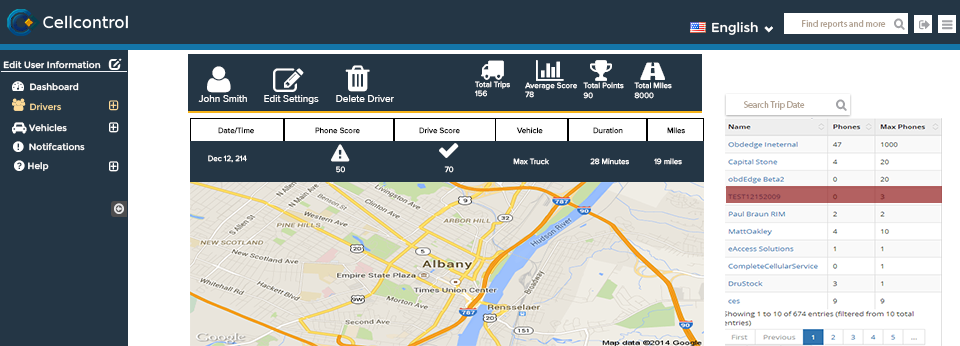
<style>
.page{position:relative;width:960px;height:346px;background:#243645}
.page>*{position:absolute;margin:0}
.t1{font:12px "MyriadPro-Regular";color:#ffffff}
.t2{font:9px "MyriadPro-Regular";color:#b3a495}
.t3{font:12px "MyriadPro-Regular";color:#fcd996}
.t4{font:12px "MyriadPro-Regular";color:#000000}
</style>
<div class="page">
<p class="t1" style="left:712px;top:22px;width:46px;height:13px">English</p>
<p class="t2" style="left:802px;top:20px;width:84px;height:9px">Find reports and more</p>
<p class="t1" style="left:3px;top:61px;width:98px;height:8px">Edit User Information</p>
<p class="t1" style="left:30px;top:83px;width:49px;height:8px">Dashboard</p>
<p class="t1" style="left:475px;top:81px;width:35px;height:16px">Total Trips<br>156</p>
<p class="t1" style="left:525px;top:82px;width:52px;height:16px">Average Score<br>78</p>
<p class="t1" style="left:583px;top:82px;width:41px;height:17px">Total Points<br>90</p>
<p class="t1" style="left:634px;top:82px;width:38px;height:17px">Total MIles<br>8000</p>
<p class="t1" style="left:198px;top:95px;width:49px;height:7px">John Smith</p>
<p class="t1" style="left:264px;top:95px;width:55px;height:9px">Edit Settings</p>
<p class="t1" style="left:336px;top:95px;width:58px;height:7px">Delete Driver</p>
<p class="t2" style="left:744px;top:101px;width:61px;height:9px">Search Trip Date</p>
<p class="t3" style="left:30px;top:103px;width:32px;height:8px">Drivers</p>
<p class="t1" style="left:29px;top:124px;width:38px;height:8px">Vehicles</p>
<p class="t4" style="left:218px;top:127px;width:36px;height:7px">Date/Time</p>
<p class="t4" style="left:315px;top:127px;width:45px;height:7px">Phone Score</p>
<p class="t4" style="left:419px;top:127px;width:41px;height:7px">Drive Score</p>
<p class="t4" style="left:516px;top:127px;width:27px;height:7px">Vehicle</p>
<p class="t4" style="left:593px;top:127px;width:30px;height:7px">Duration</p>
<p class="t4" style="left:667px;top:127px;width:18px;height:7px">Miles</p>
<p class="t1" style="left:29px;top:143px;width:56px;height:8px">Notifcations</p>
<p class="t1" style="left:208px;top:155px;width:39px;height:8px">Dec 12, 214</p>
<p class="t1" style="left:513px;top:158px;width:36px;height:7px">Max Truck</p>
<p class="t1" style="left:590px;top:158px;width:39px;height:7px">28 Minutes</p>
<p class="t1" style="left:654px;top:158px;width:28px;height:7px">19 miles</p>
<p class="t1" style="left:28px;top:162px;width:21px;height:9px">Help</p>
<p class="t1" style="left:336px;top:166px;width:9px;height:7px">50</p>
<p class="t1" style="left:444px;top:166px;width:10px;height:7px">70</p>
</div>
